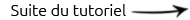
<style>
.page{position:relative;width:190px;height:20px;background:#ffffff}
.page>*{position:absolute;margin:0}
.t1{font:16px "Ubuntu-Light";color:#000000}
</style>
<div class="page">
<p class="t1" style="left:11px;top:4px;width:115px;height:12px">Suite du tutoriel</p>
</div>
